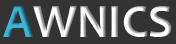
<style>
.page{position:relative;width:176px;height:44px;background:#333333}
.page>*{position:absolute;margin:0}
.t1{font:48px "Candara-Bold"}
</style>
<div class="page">
<p class="t1" style="left:3px;top:6px;width:169px;height:31px">AWNICS</p>
</div>
